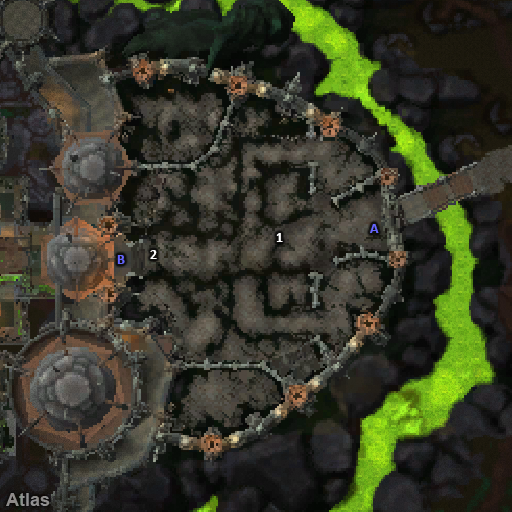
<style>
.page{position:relative;width:512px;height:512px}
.page>*{position:absolute;margin:0}
.t1{font:14px "Calibri-Bold";color:#ffffff}
.t2{font:14px "Calibri-Bold";color:#6666ff}
</style>
<div class="page">
<p class="t1" style="left:276px;top:233px;width:7px;height:9px">1</p>
<p class="t2" style="left:370px;top:224px;width:9px;height:9px">A</p>
<p class="t2" style="left:117px;top:255px;width:8px;height:9px">B</p>
<p class="t1" style="left:150px;top:250px;width:7px;height:9px">2</p>
</div>
